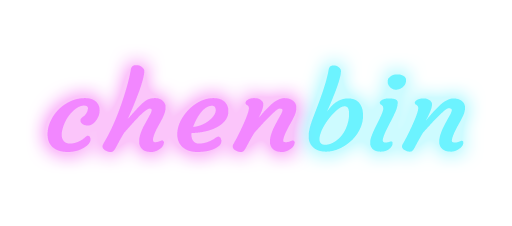
<style>
.page{position:relative;width:512px;height:226px;background:#ffffff}
.page>*{position:absolute;margin:0}
.t1{font:103.6px "Courgette-Regular";color:#f287ff;font-weight:bold;scale:1.16 1}
.t2{font:103.6px "Courgette-Regular";color:#6cf3ff;scale:1.16 1}
</style>
<div class="page">
<p class="t1" style="left:47px;top:65px;width:250px;height:87px">chen</p>
<p class="t2" style="left:308px;top:65px;width:157px;height:87px">bin</p>
</div>
